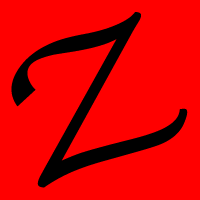
<style>
.page{position:relative;width:200px;height:200px;background:#ff0000}
.page>*{position:absolute;margin:0}
.t1{font:193.5px "Apple-Chancery";color:#000000;scale:1.6 1}
</style>
<div class="page">
<p class="t1" style="left:11px;top:12px;width:177px;height:176px;rotate:-20deg">Z</p>
</div>
